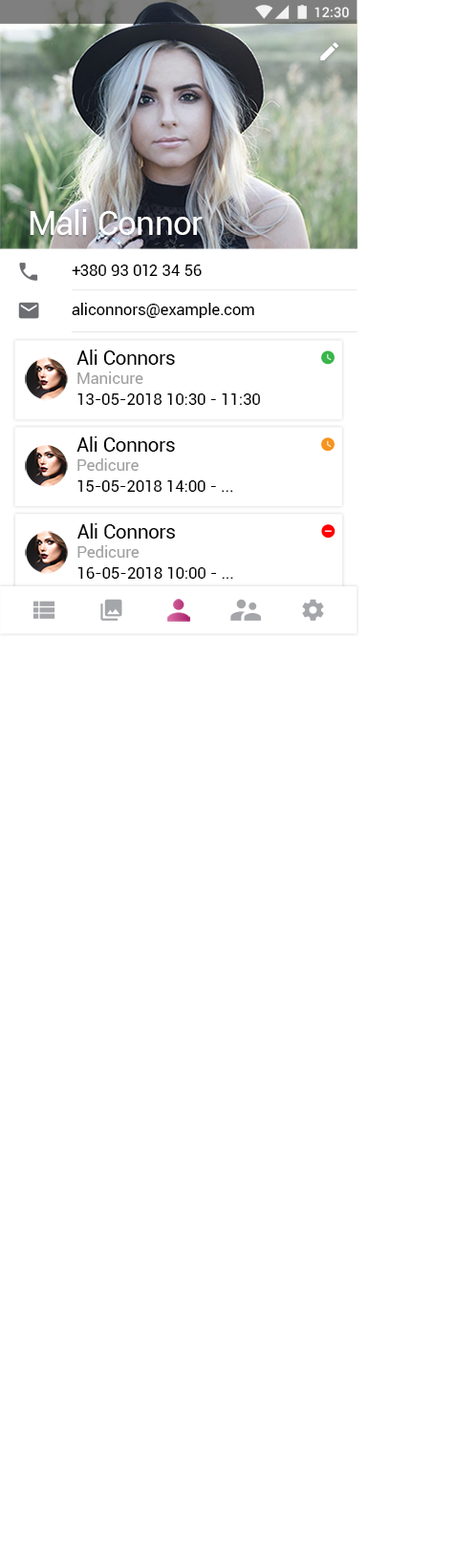
<style>
.page{position:relative;width:455px;height:1568px;background:#ffffff}
.page>*{position:absolute;margin:0}
.t1{font:13.9px "Roboto-Medium";color:#ffffff}
.t2{font:33.7px "Roboto-Regular";letter-spacing:-0.005em;color:#ffffff}
.t3{font:15.8px "Roboto-Regular";letter-spacing:0.01em;color:#000000}
.t4{font:19.8px "Roboto-Regular";letter-spacing:-0.005em;color:#000000}
.t5{font:15.8px "Roboto-Regular";color:#a1a1a1}
.t6{font:15.8px "Roboto-Regular";color:#000000}
</style>
<div class="page">
<p class="t1" style="left:314px;top:7px;width:35px;height:11px">12:30</p>
<p class="t2" style="left:30px;top:209px;width:172px;height:26px">Mali Connor</p>
<p class="t3" style="left:72px;top:265px;width:129px;height:11px">+380 93 012 34 56</p>
<p class="t3" style="left:72px;top:303px;width:182px;height:15px">aliconnors@example.com</p>
<p class="t4" style="left:76px;top:350px;width:99px;height:15px">Ali Connors</p>
<p class="t5" style="left:77px;top:371px;width:66px;height:13px">Manicure</p>
<p class="t6" style="left:77px;top:393px;width:183px;height:12px">13-05-2018 10:30 - 11:30</p>
<p class="t4" style="left:76px;top:436px;width:99px;height:16px">Ali Connors</p>
<p class="t5" style="left:77px;top:458px;width:61px;height:13px">Pedicure</p>
<p class="t6" style="left:77px;top:480px;width:156px;height:12px">15-05-2018 14:00 - ...</p>
<p class="t4" style="left:77px;top:523px;width:98px;height:16px">Ali Connors</p>
<p class="t5" style="left:77px;top:545px;width:62px;height:13px">Pedicure</p>
<p class="t6" style="left:77px;top:567px;width:156px;height:12px">16-05-2018 10:00 - ...</p>
</div>
